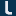
<style>
.page{position:relative;width:16px;height:16px;background:#073351}
.page>*{position:absolute;margin:0}
.t1{font:18px "PlanetEstyle";color:#eaeaf2}
</style>
<div class="page">
<p class="t1" style="left:5px;top:1px;width:6px;height:14px">l</p>
</div>
